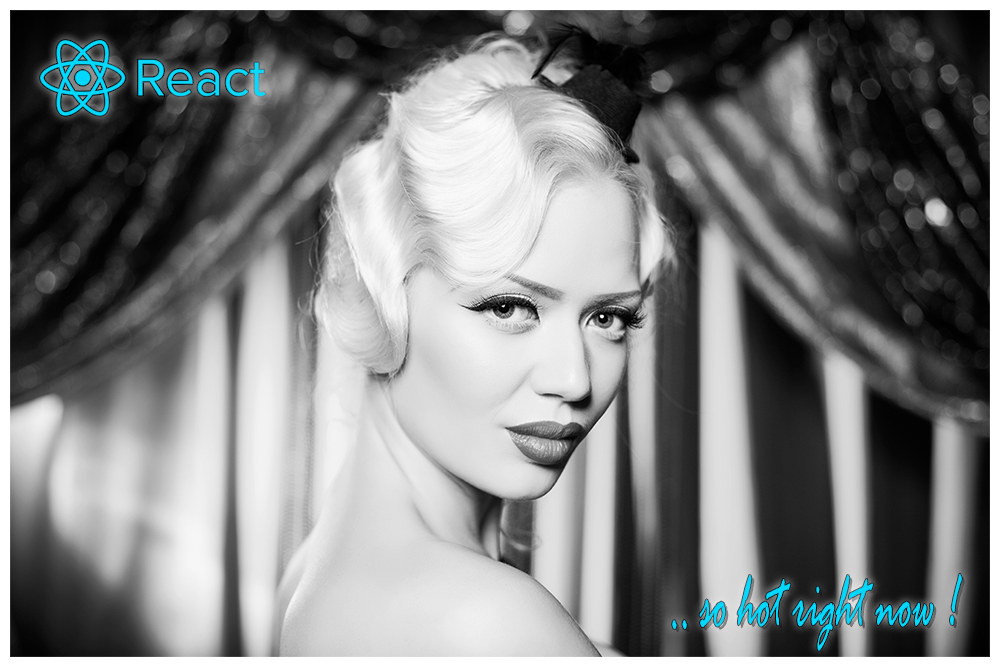
<style>
.page{position:relative;width:1000px;height:667px}
.page>*{position:absolute;margin:0}
.t1{font:83.3px "RageItalic";color:#00d8ff;scale:0.5 1}
</style>
<div class="page">
<p class="t1" style="left:672px;top:573px;width:290px;height:78px">.. so hot right now !</p>
</div>
